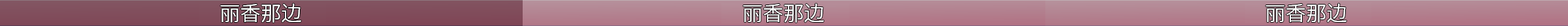
<style>
.page{position:relative;width:1568px;height:26px}
.page>*{position:absolute;margin:0}
.t1{font:20.6px "SourceHanSansSC-Normal";color:#ffffff}
</style>
<div class="page">
<p class="t1" style="left:220px;top:3px;width:81px;height:20px">丽香那边</p>
<p class="t1" style="left:743px;top:3px;width:81px;height:20px">丽香那边</p>
<p class="t1" style="left:1266px;top:3px;width:81px;height:20px">丽香那边</p>
</div>
